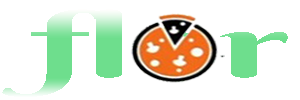
<style>
.page{position:relative;width:300px;height:100px;background:#ffffff}
.page>*{position:absolute;margin:0}
.t1{font:88.8px "BerkshireSwash-Regular";scale:1.92 1}
</style>
<div class="page">
<p class="t1" style="left:2px;top:9px;width:286px;height:88px">flor</p>
</div>
